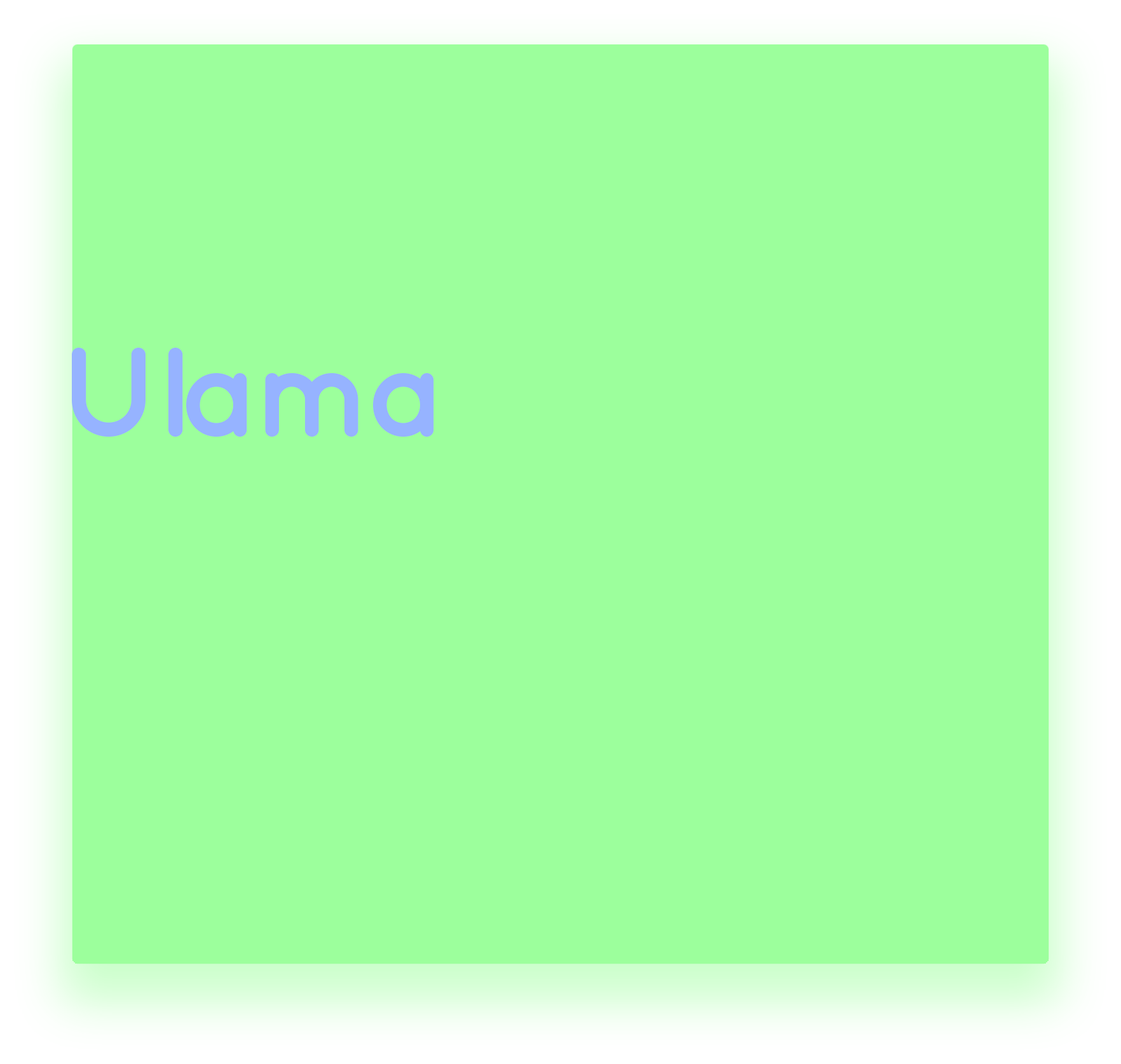
<style>
.page{position:relative;width:1121px;height:1064px;background:#9cff9c}
.page>*{position:absolute;margin:0}
.t1{font:127.1px "QuicksandBold-Regular";letter-spacing:-0.05em;color:#96b3ff}
</style>
<div class="page">
<p class="t1" style="left:72px;top:348px;width:362px;height:89px">Ulama</p>
</div>
